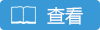
<style>
.page{position:relative;width:100px;height:30px;background:#3998d6}
.page>*{position:absolute;margin:0}
.t1{font:18px "MicrosoftYaHei";color:#ffffff}
</style>
<div class="page">
<p class="t1" style="left:47px;top:7px;width:36px;height:18px">查看</p>
</div>
